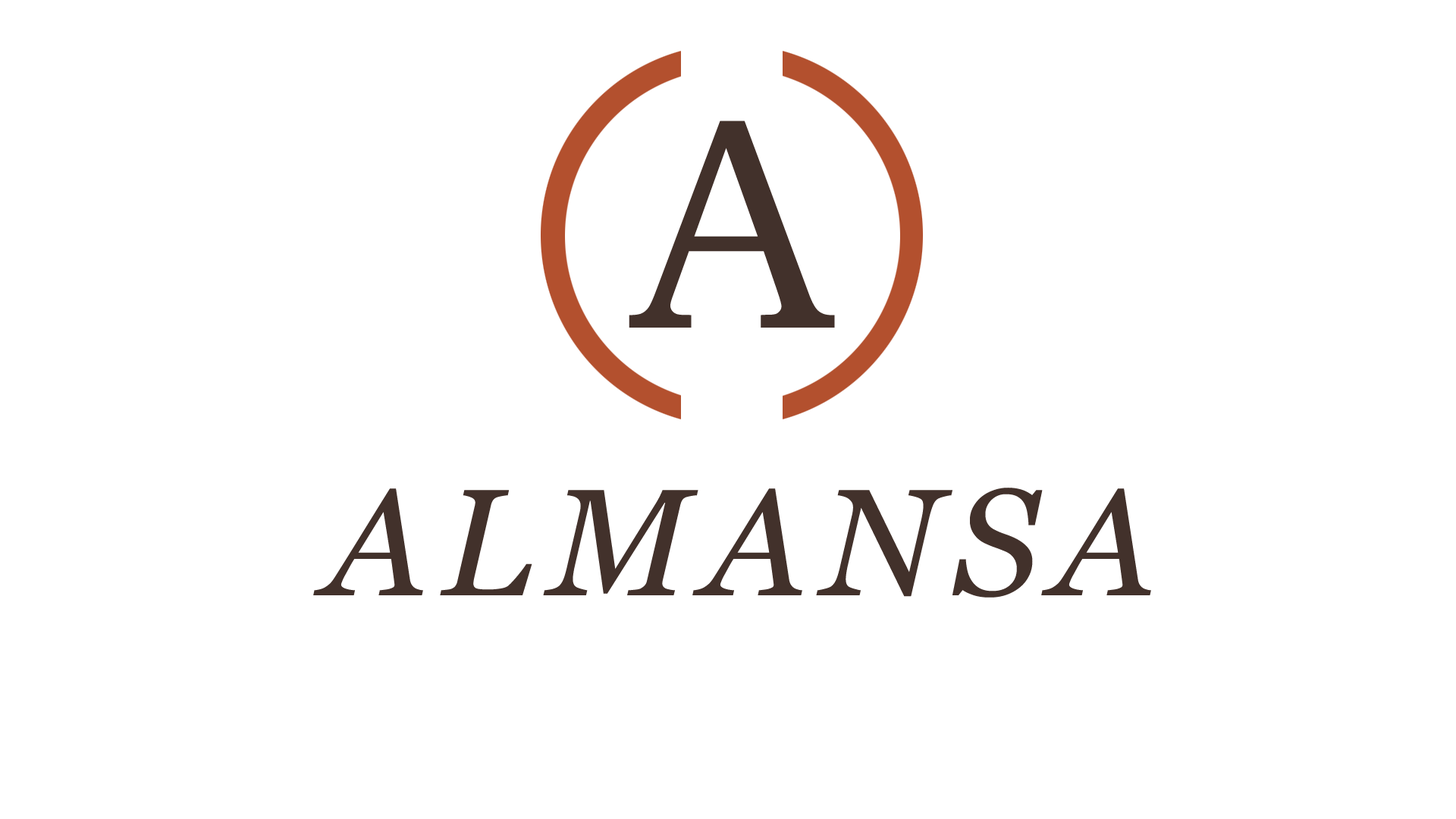
<style>
.page{position:relative;width:1456px;height:819px;background:#ffffff}
.page>*{position:absolute;margin:0}
.t1{font:303.3px "BookmanOldStyle";letter-spacing:0.1em;color:#42312b}
.t2{font:151.7px "Georgia-Italic";letter-spacing:0.1em;color:#42312b}
</style>
<div class="page">
<p class="t1" style="left:629px;top:121px;width:206px;height:207px">A</p>
<p class="t2" style="left:313px;top:488px;width:838px;height:110px">ALMANSA</p>
</div>
